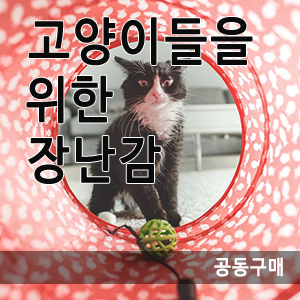
<style>
.page{position:relative;width:300px;height:300px}
.page>*{position:absolute;margin:0}
.t1{font:50.5px "NanumBarunGothicOTF";letter-spacing:0.075em;color:#0a0a0a;font-weight:bold;scale:0.91 1}
.t2{font:19.8px "NanumBarunGothicOTF";letter-spacing:0.075em;color:#ffffff;font-weight:bold;scale:0.91 1}
</style>
<div class="page">
<p class="t1" style="left:28px;top:17px;width:225px;height:49px">고양이들을</p>
<p class="t1" style="left:26px;top:75px;width:87px;height:49px">위한</p>
<p class="t1" style="left:28px;top:136px;width:133px;height:48px">장난감</p>
<p class="t2" style="left:214px;top:257px;width:69px;height:20px">공동구매</p>
</div>
